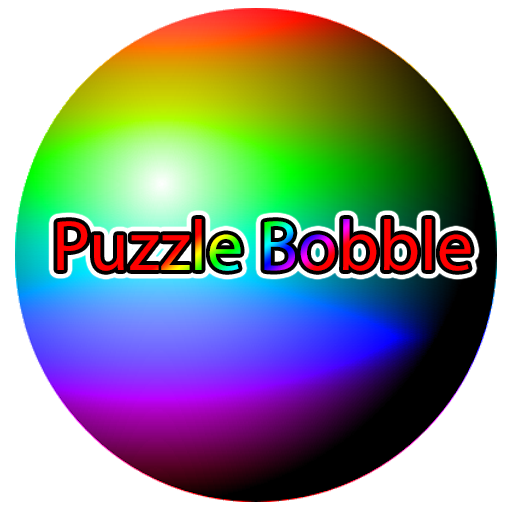
<style>
.page{position:relative;width:512px;height:512px;background:#ffffff}
.page>*{position:absolute;margin:0}
.t1{font:72px "MyriadPro-Regular"}
</style>
<div class="page">
<p class="t1" style="left:57px;top:219px;width:414px;height:52px">Puzzle Bobble</p>
</div>
